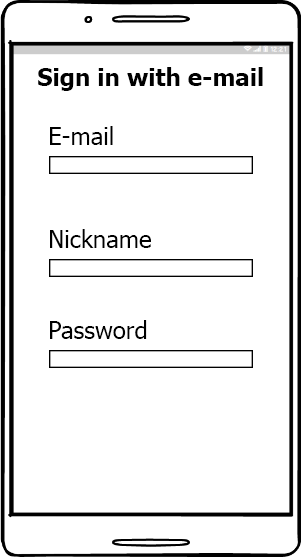
<style>
.page{position:relative;width:301px;height:557px;background:#ffffff}
.page>*{position:absolute;margin:0}
.t1{font:24px "Tahoma-Bold";color:#000000}
.t2{font:24px "Tahoma";color:#000000}
</style>
<div class="page">
<p class="t1" style="left:38px;top:67px;width:225px;height:24px">Sign in with e-mail</p>
<p class="t2" style="left:50px;top:126px;width:63px;height:19px">E-mail</p>
<p class="t2" style="left:50px;top:229px;width:101px;height:19px">Nickname</p>
<p class="t2" style="left:50px;top:320px;width:97px;height:19px">Password</p>
</div>
